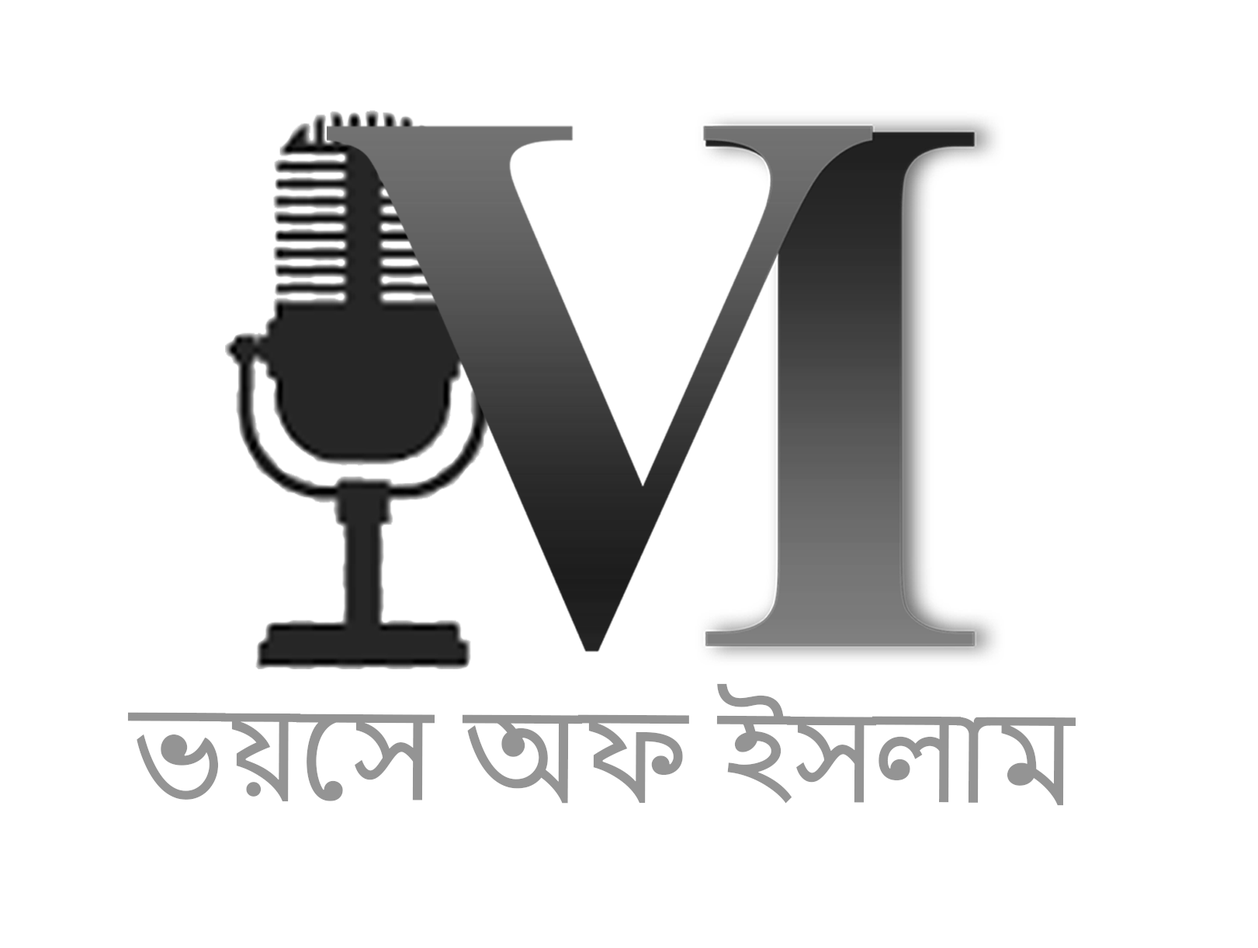
<style>
.page{position:relative;width:1258px;height:948px;background:#ffffff}
.page>*{position:absolute;margin:0}
.t1{font:117.4px "NirmalaUI";color:#949494}
</style>
<div class="page">
<p class="t1" style="left:127px;top:683px;width:950px;height:123px">ভয়েস অফ ইসলাম</p>
</div>
